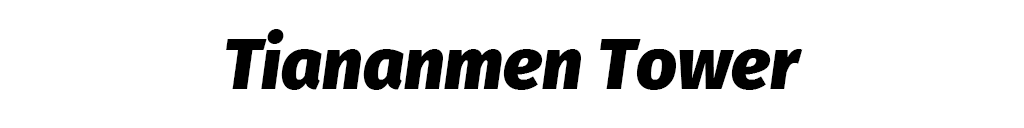
<style>
.page{position:relative;width:1024px;height:128px;background:#ffffff}
.page>*{position:absolute;margin:0}
.t1{font:71.8px "FiraSans-BlackItalic";color:#000000}
</style>
<div class="page">
<p class="t1" style="left:226px;top:29px;width:577px;height:61px">Tiananmen Tower</p>
</div>
